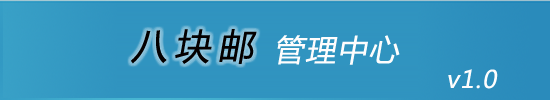
<style>
.page{position:relative;width:550px;height:100px}
.page>*{position:absolute;margin:0}
.t1{font:36px "MicrosoftYaHei";letter-spacing:0.2em;color:#040000;font-style:italic}
.t2{font:30px "MicrosoftYaHei";letter-spacing:0.05em;color:#fefdfd;font-style:italic}
.t3{font:24px "MicrosoftYaHei";letter-spacing:0.05em;color:#fefdfd;font-style:italic}
</style>
<div class="page">
<p class="t1" style="left:131px;top:29px;width:126px;height:35px">八块邮</p>
<p class="t2" style="left:277px;top:35px;width:123px;height:30px">管理中心</p>
<p class="t3" style="left:448px;top:69px;width:50px;height:20px">v1.0</p>
</div>
